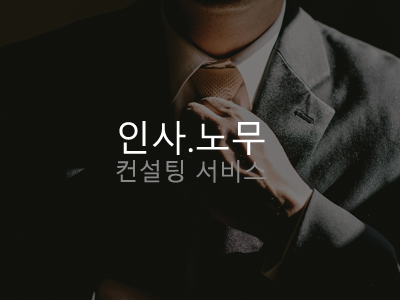
<style>
.page{position:relative;width:400px;height:300px;background:#10110d}
.page>*{position:absolute;margin:0}
.t1{font:24px "MalgunGothic";color:#888888}
.t2{font:36px "MalgunGothic";color:#ffffff}
</style>
<div class="page">
<p class="t1" style="left:116px;top:121px;width:150px;height:62px;text-align:center"><span class="t2">인사.노무<br></span>컨설팅 서비스</p>
</div>
